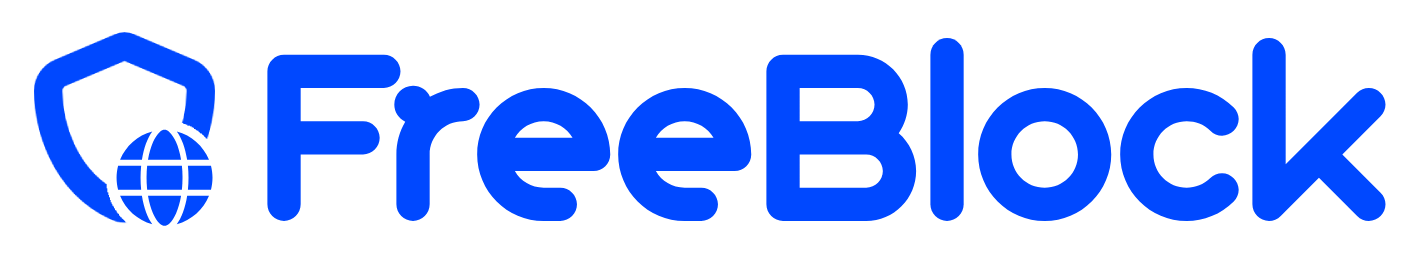
<style>
.page{position:relative;width:1428px;height:261px;background:#ffffff}
.page>*{position:absolute;margin:0}
.t1{font:259.9px "GeometrySoftPro-BoldN";color:#0048ff}
</style>
<div class="page">
<p class="t1" style="left:267px;top:38px;width:1119px;height:183px">FreeBlock</p>
</div>
